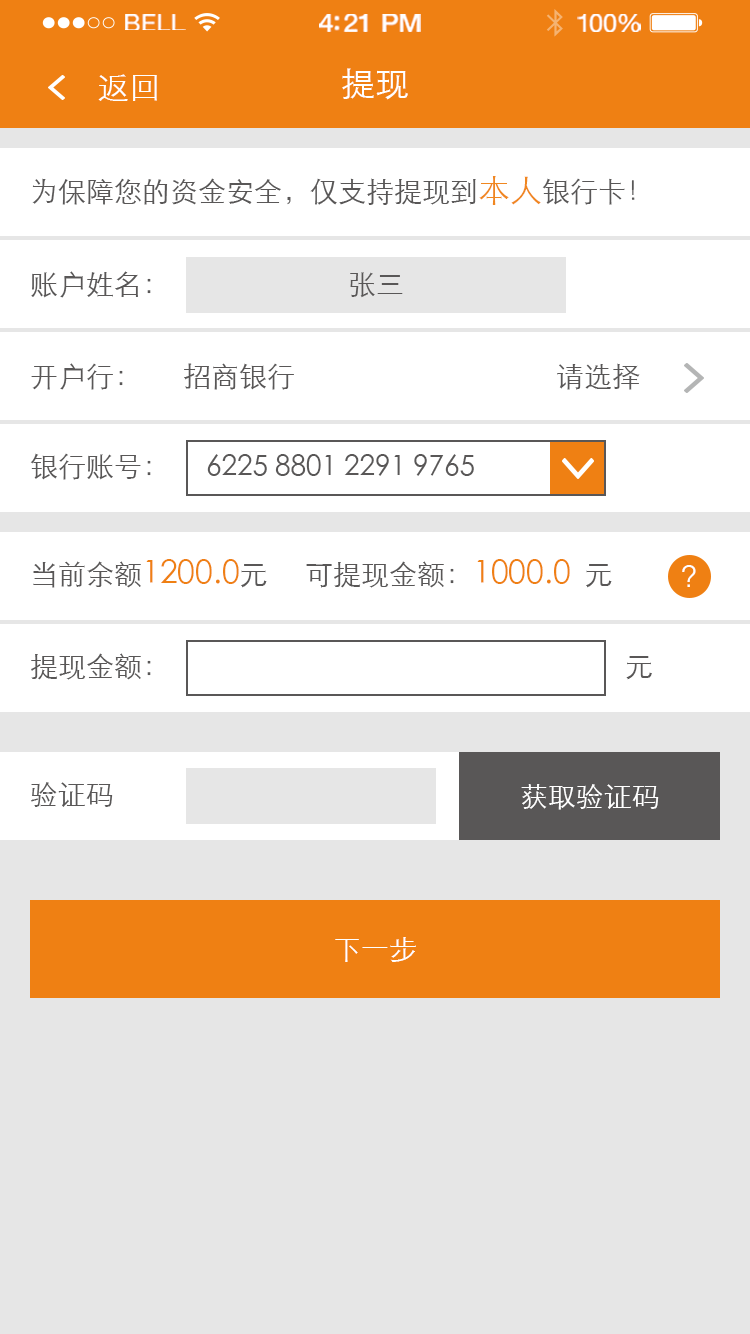
<style>
.page{position:relative;width:750px;height:1334px;background:#e6e6e6}
.page>*{position:absolute;margin:0}
.t1{font:23.3px "HelveticaNeue";letter-spacing:0.02em;color:#ffffff;scale:1.06 1}
.t2{font:25.3px "HelveticaNeue-Medium";letter-spacing:-0.02em;color:#ffffff;scale:1.06 1}
.t3{font:24.3px "HelveticaNeue";letter-spacing:-0.02em;color:#ffffff;scale:1.06 1}
.t4{font:32px "STXihei";color:#ffffff}
.t5{font:34px "STXihei";color:#ffffff}
.t6{font:28px "STXihei";color:#595757}
.t7{font:32px "STXihei";color:#f08720}
.t8{font:32px "STXihei";color:#ef8013}
.t9{font:28px "STXihei";color:#ffffff}
</style>
<div class="page">
<p class="t1" style="left:125px;top:14px;width:61px;height:16px">BELL</p>
<p class="t2" style="left:319px;top:14px;width:102px;height:18px">4:21 PM</p>
<p class="t3" style="left:577px;top:14px;width:64px;height:18px">100%</p>
<p class="t4" style="left:98px;top:74px;width:59px;height:27px">返回</p>
<p class="t5" style="left:342px;top:68px;width:66px;height:32px">提现</p>
<p class="t6" style="left:32px;top:176px;width:603px;height:29px">为保障您的资金安全，仅支持提现到<span class="t7">本人</span>银行卡！</p>
<p class="t6" style="left:31px;top:271px;width:120px;height:27px">账户姓名：</p>
<p class="t6" style="left:350px;top:272px;width:53px;height:26px">张三</p>
<p class="t6" style="left:31px;top:363px;width:92px;height:27px">开户行：</p>
<p class="t6" style="left:184px;top:363px;width:110px;height:27px">招商银行</p>
<p class="t6" style="left:557px;top:363px;width:83px;height:27px">请选择</p>
<p class="t6" style="left:30px;top:453px;width:121px;height:27px">银行账号：</p>
<p class="t6" style="left:207px;top:454px;width:267px;height:22px">6225 8801 2291 9765</p>
<p class="t8" style="left:33px;top:559px;width:234px;height:29px"><span class="t6">当前余额</span>1200.0<span class="t6">元</span></p>
<p class="t6" style="left:306px;top:559px;width:306px;height:29px">可提现金额：<span class="t8">1000.0</span>  元</p>
<p class="t4" style="left:682px;top:565px;width:14px;height:22px">？</p>
<p class="t6" style="left:31px;top:653px;width:120px;height:27px">提现金额：</p>
<p class="t6" style="left:626px;top:656px;width:26px;height:24px">元</p>
<p class="t6" style="left:31px;top:782px;width:82px;height:25px">验证码</p>
<p class="t9" style="left:521px;top:784px;width:138px;height:26px">获取验证码</p>
<p class="t9" style="left:335px;top:937px;width:81px;height:25px">下一步</p>
</div>
